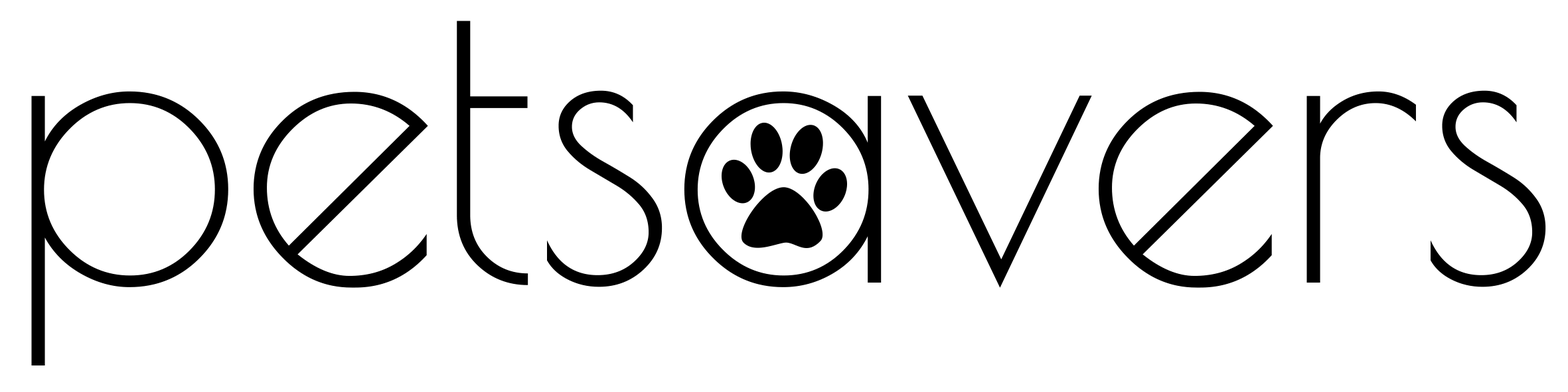
<style>
.page{position:relative;width:1568px;height:392px;background:#ffffff}
.page>*{position:absolute;margin:0}
.t1{font:415px "PoiretOne-Regular";letter-spacing:0.005em;color:#000000}
</style>
<div class="page">
<p class="t1" style="left:31px;top:21px;width:1515px;height:345px">petsavers</p>
</div>
